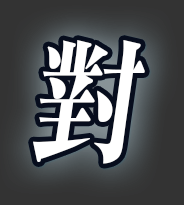
<style>
.page{position:relative;width:184px;height:205px;background:#333333}
.page>*{position:absolute;margin:0}
.t1{font:132.6px "RyuminPro-Heavy";letter-spacing:0.1em;color:#ffffff;font-style:italic;scale:0.81 1}
</style>
<div class="page">
<p class="t1" style="left:33px;top:40px;width:112px;height:124px">對</p>
</div>
